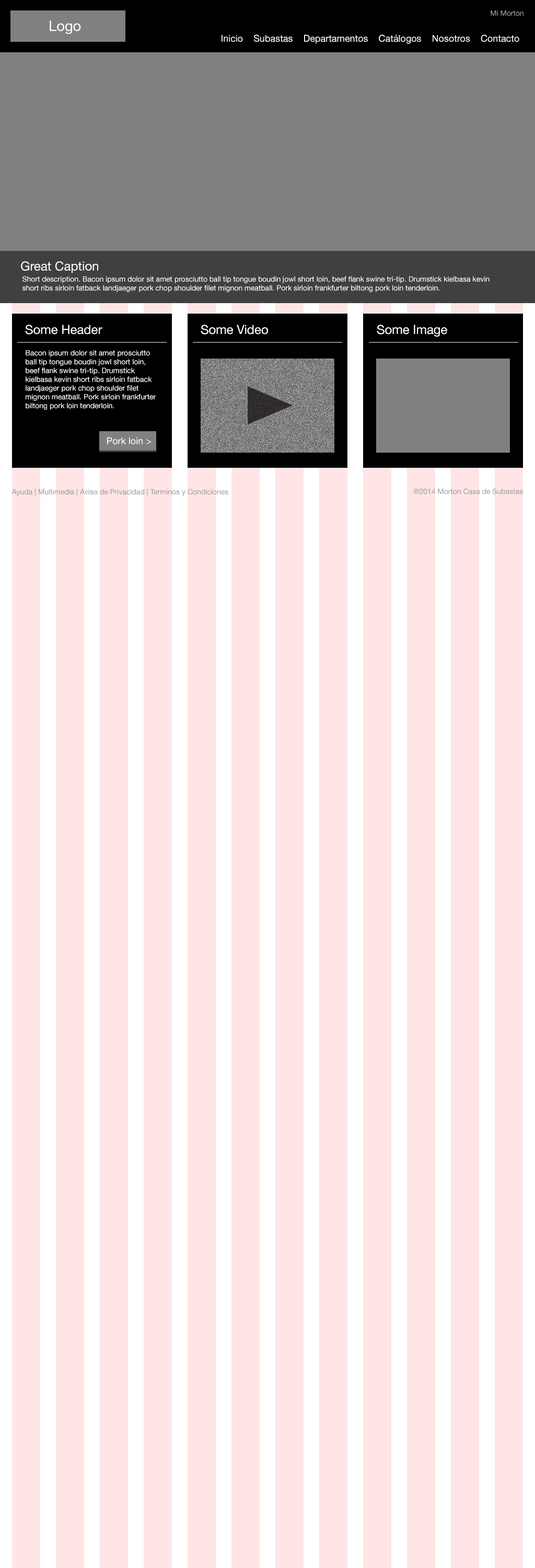
<style>
.page{position:relative;width:535px;height:1568px;background:#ffe5e5}
.page>*{position:absolute;margin:0}
.t1{font:7.3px "HelveticaNeue";color:#999999}
.t2{font:14.3px "HelveticaNeue";color:#ffffff}
.t3{font:9.4px "HelveticaNeue";color:#ffffff}
.t4{font:12.5px "HelveticaNeue";color:#ffffff}
.t5{font:7.3px "HelveticaNeue";color:#ffffff}
</style>
<div class="page">
<p class="t1" style="left:491px;top:10px;width:33px;height:6px">Mi Morton</p>
<p class="t2" style="left:50px;top:20px;width:31px;height:14px">Logo</p>
<p class="t3" style="left:222px;top:34px;width:298px;height:10px">Inicio    Subastas    Departamentos    Catálogos    Nosotros    Contacto</p>
<p class="t4" style="left:21px;top:261px;width:77px;height:12px">Great Caption</p>
<p class="t5" style="left:22px;top:276px;width:468px;height:16px">Short description. Bacon ipsum dolor sit amet prosciutto ball tip tongue boudin jowl short loin, beef flank swine tri-tip. Drumstick kielbasa kevin<br>short ribs sirloin fatback landjaeger pork chop shoulder filet mignon meatball. Pork sirloin frankfurter biltong pork loin tenderloin.</p>
<p class="t4" style="left:25px;top:325px;width:77px;height:10px">Some Header</p>
<p class="t4" style="left:201px;top:325px;width:67px;height:10px">Some Video</p>
<p class="t4" style="left:377px;top:325px;width:70px;height:12px">Some Image</p>
<p class="t5" style="left:26px;top:350px;width:130px;height:60px">Bacon ipsum dolor sit amet prosciutto<br>ball tip tongue boudin jowl short loin,<br>beef flank swine tri-tip. Drumstick<br>kielbasa kevin short ribs sirloin fatback<br>landjaeger pork chop shoulder filet<br>mignon meatball. Pork sirloin frankfurter<br>biltong pork loin tenderloin.</p>
<p class="t3" style="left:107px;top:437px;width:45px;height:7px">Pork loin &gt;</p>
<p class="t1" style="left:11px;top:488px;width:217px;height:8px">Ayuda | Multimedia | Aviso de Privacidad | Terminos y Condiciones</p>
<p class="t1" style="left:413px;top:488px;width:110px;height:6px">®2014 Morton Casa de Subastas</p>
</div>
